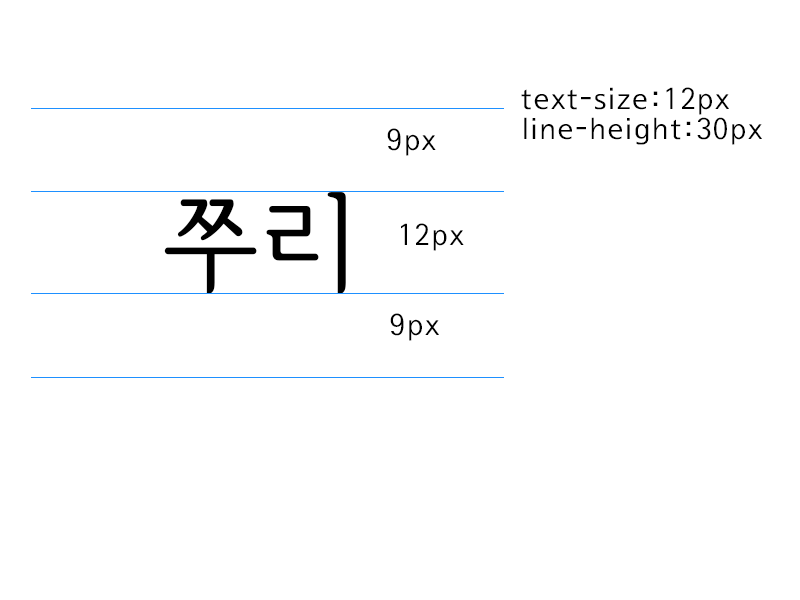
<style>
.page{position:relative;width:800px;height:600px;background:#ffffff}
.page>*{position:absolute;margin:0}
.t1{font:30px "SeoulNamsanM";letter-spacing:0.06em;color:#000000}
.t2{font:29.8px "SeoulNamsanM";letter-spacing:0.06em;color:#000000}
.t3{font:109.7px "SeoulHangangM";letter-spacing:0.06em;color:#000000}
</style>
<div class="page">
<p class="t1" style="left:521px;top:87px;width:208px;height:28px">text-size:12px</p>
<p class="t2" style="left:524px;top:117px;width:238px;height:28px">line-height:30px</p>
<p class="t1" style="left:387px;top:128px;width:49px;height:28px">9px</p>
<p class="t3" style="left:164px;top:192px;width:182px;height:102px">쭈리</p>
<p class="t1" style="left:401px;top:223px;width:63px;height:28px">12px</p>
<p class="t1" style="left:390px;top:313px;width:49px;height:28px">9px</p>
</div>
